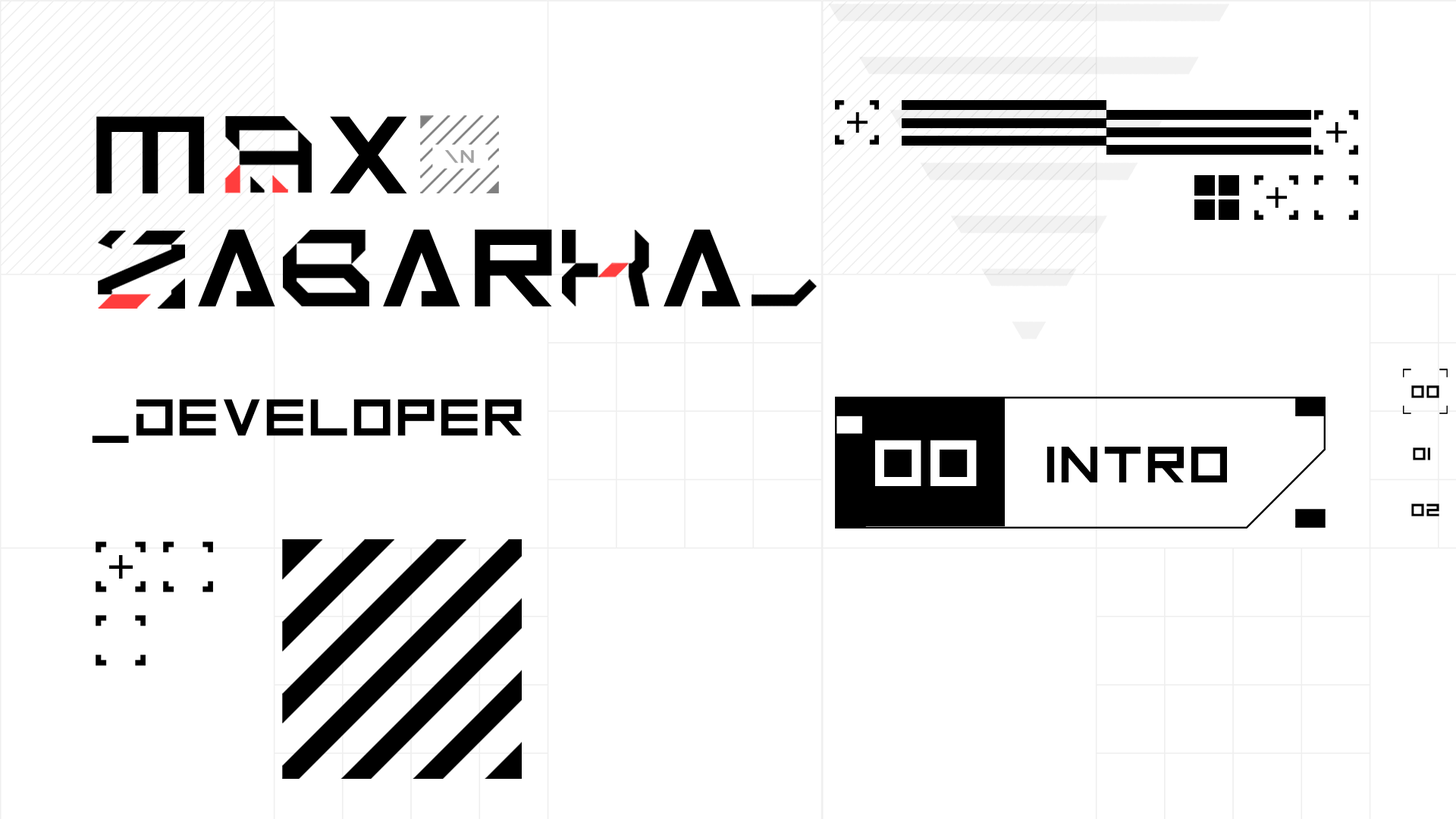
<style>
.page{position:relative;width:1456px;height:819px;background:#ffffff}
.page>*{position:absolute;margin:0}
.t1{font:123px "Android101";color:#000000}
.t2{font:20.5px "Android101";color:#a3a3a3}
.t3{font:20px "Android101";color:#000000}
.t4{font:58.1px "Android101";color:#000000}
.t5{font:73.1px "Android101";color:#ffffff}
.t6{font:57.5px "Android101";color:#000000}
</style>
<div class="page">
<p class="t1" style="left:96px;top:116px;width:311px;height:78px">M  X</p>
<p class="t2" style="left:444px;top:150px;width:30px;height:13px">\n</p>
<p class="t1" style="left:198px;top:229px;width:543px;height:78px">A  AR  A</p>
<p class="t3" style="left:1411px;top:385px;width:28px;height:13px">00</p>
<p class="t4" style="left:92px;top:399px;width:430px;height:44px">_DEVELOPER</p>
<p class="t5" style="left:875px;top:440px;width:102px;height:46px">00</p>
<p class="t6" style="left:1046px;top:447px;width:181px;height:36px">INTRO</p>
<p class="t3" style="left:1413px;top:447px;width:17px;height:13px">01</p>
<p class="t3" style="left:1411px;top:504px;width:28px;height:12px">02</p>
</div>
